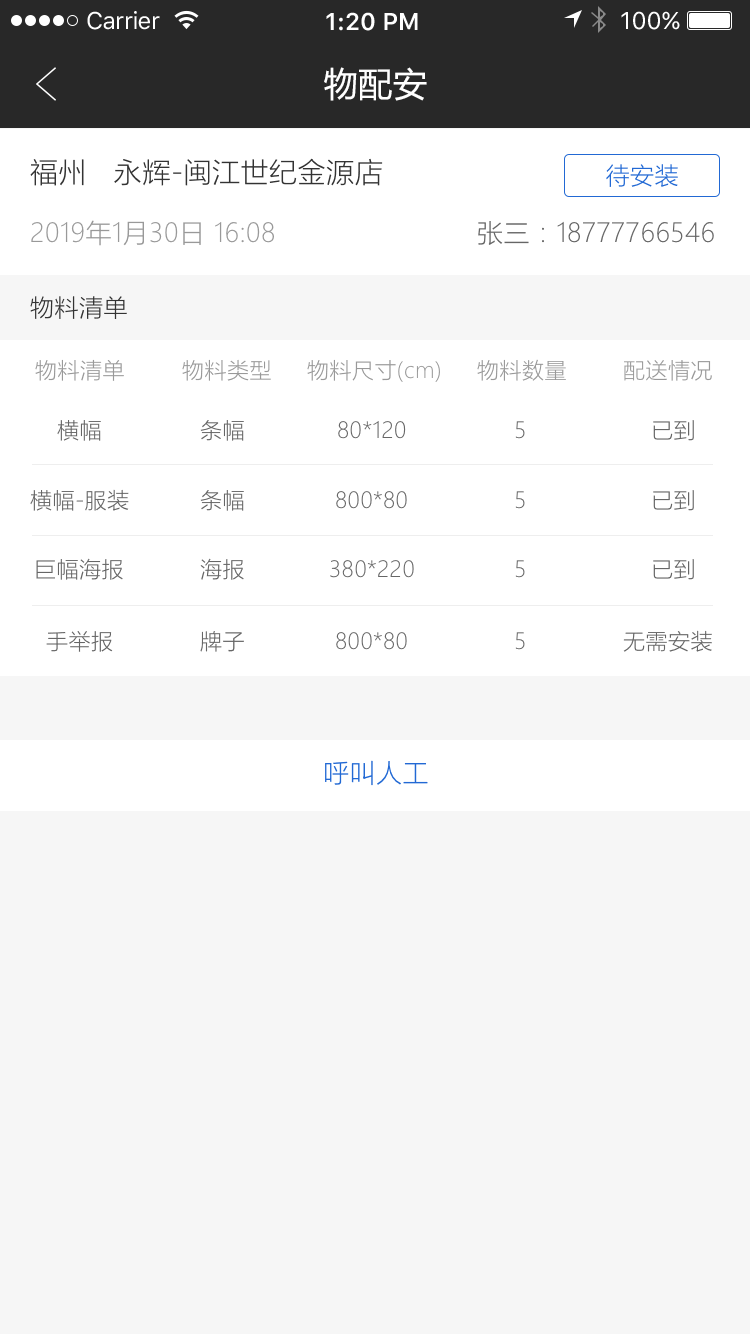
<style>
.page{position:relative;width:750px;height:1334px;background:#f6f6f6}
.page>*{position:absolute;margin:0}
.t1{font:24px "SFUIText-Regular";letter-spacing:-0.025em;color:#ffffff}
.t2{font:24px "SFUIText-Semibold";color:#ffffff}
.t3{font:24px "SFUIText-Regular";color:#ffffff}
.t4{font:34px "MicrosoftYaHei";letter-spacing:0.02em;color:#ffffff}
.t5{font:28px "MicrosoftYaHeiLight";letter-spacing:0.02em;color:#333333}
.t6{font:24px "MicrosoftYaHeiLight";letter-spacing:0.02em;color:#2269d4}
.t7{font:26px "MicrosoftYaHeiLight";letter-spacing:0.02em;color:#999999}
.t8{font:26px "MicrosoftYaHeiLight";letter-spacing:0.02em;color:#666666}
.t9{font:24px "MicrosoftYaHeiLight";letter-spacing:0.02em;color:#333333}
.t10{font:22px "MicrosoftYaHeiLight";letter-spacing:0.02em;color:#999999}
.t11{font:22px "MicrosoftYaHeiLight";letter-spacing:0.02em;color:#666666}
.t12{font:26px "MicrosoftYaHeiLight";letter-spacing:0.02em;color:#2269d4}
</style>
<div class="page">
<p class="t1" style="left:87px;top:11px;width:73px;height:19px">Carrier</p>
<p class="t2" style="left:326px;top:12px;width:92px;height:19px">1:20 PM</p>
<p class="t3" style="left:621px;top:11px;width:59px;height:19px">100%</p>
<p class="t4" style="left:324px;top:67px;width:103px;height:34px">物配安</p>
<p class="t5" style="left:30px;top:158px;width:353px;height:28px">福州   永辉-闽江世纪金源店</p>
<p class="t6" style="left:606px;top:164px;width:72px;height:23px">待安装</p>
<p class="t7" style="left:31px;top:220px;width:243px;height:26px">2019年1月30日 16:08</p>
<p class="t8" style="left:478px;top:221px;width:236px;height:24px">张三：18777766546</p>
<p class="t9" style="left:30px;top:296px;width:97px;height:23px">物料清单</p>
<p class="t10" style="left:35px;top:359px;width:89px;height:22px">物料清单</p>
<p class="t10" style="left:182px;top:359px;width:89px;height:22px">物料类型</p>
<p class="t10" style="left:307px;top:359px;width:133px;height:23px">物料尺寸(cm)</p>
<p class="t10" style="left:477px;top:359px;width:89px;height:22px">物料数量</p>
<p class="t10" style="left:624px;top:360px;width:88px;height:21px">配送情况</p>
<p class="t11" style="left:57px;top:420px;width:44px;height:21px">横幅</p>
<p class="t11" style="left:200px;top:420px;width:44px;height:21px">条幅</p>
<p class="t11" style="left:338px;top:421px;width:68px;height:18px">80*120</p>
<p class="t11" style="left:515px;top:421px;width:10px;height:18px">5</p>
<p class="t11" style="left:653px;top:420px;width:41px;height:21px">已到</p>
<p class="t11" style="left:30px;top:489px;width:99px;height:22px">横幅-服装</p>
<p class="t11" style="left:200px;top:490px;width:44px;height:21px">条幅</p>
<p class="t11" style="left:336px;top:491px;width:71px;height:18px">800*80</p>
<p class="t11" style="left:515px;top:491px;width:10px;height:18px">5</p>
<p class="t11" style="left:653px;top:490px;width:41px;height:21px">已到</p>
<p class="t11" style="left:36px;top:558px;width:87px;height:22px">巨幅海报</p>
<p class="t11" style="left:200px;top:558px;width:44px;height:22px">海报</p>
<p class="t11" style="left:330px;top:560px;width:84px;height:18px">380*220</p>
<p class="t11" style="left:515px;top:560px;width:10px;height:18px">5</p>
<p class="t11" style="left:653px;top:559px;width:41px;height:21px">已到</p>
<p class="t11" style="left:623px;top:630px;width:89px;height:22px">无需安装</p>
<p class="t11" style="left:46px;top:631px;width:67px;height:21px">手举报</p>
<p class="t11" style="left:200px;top:631px;width:44px;height:21px">牌子</p>
<p class="t11" style="left:336px;top:632px;width:71px;height:18px">800*80</p>
<p class="t11" style="left:515px;top:632px;width:10px;height:18px">5</p>
<p class="t12" style="left:325px;top:760px;width:103px;height:26px">呼叫人工</p>
</div>
